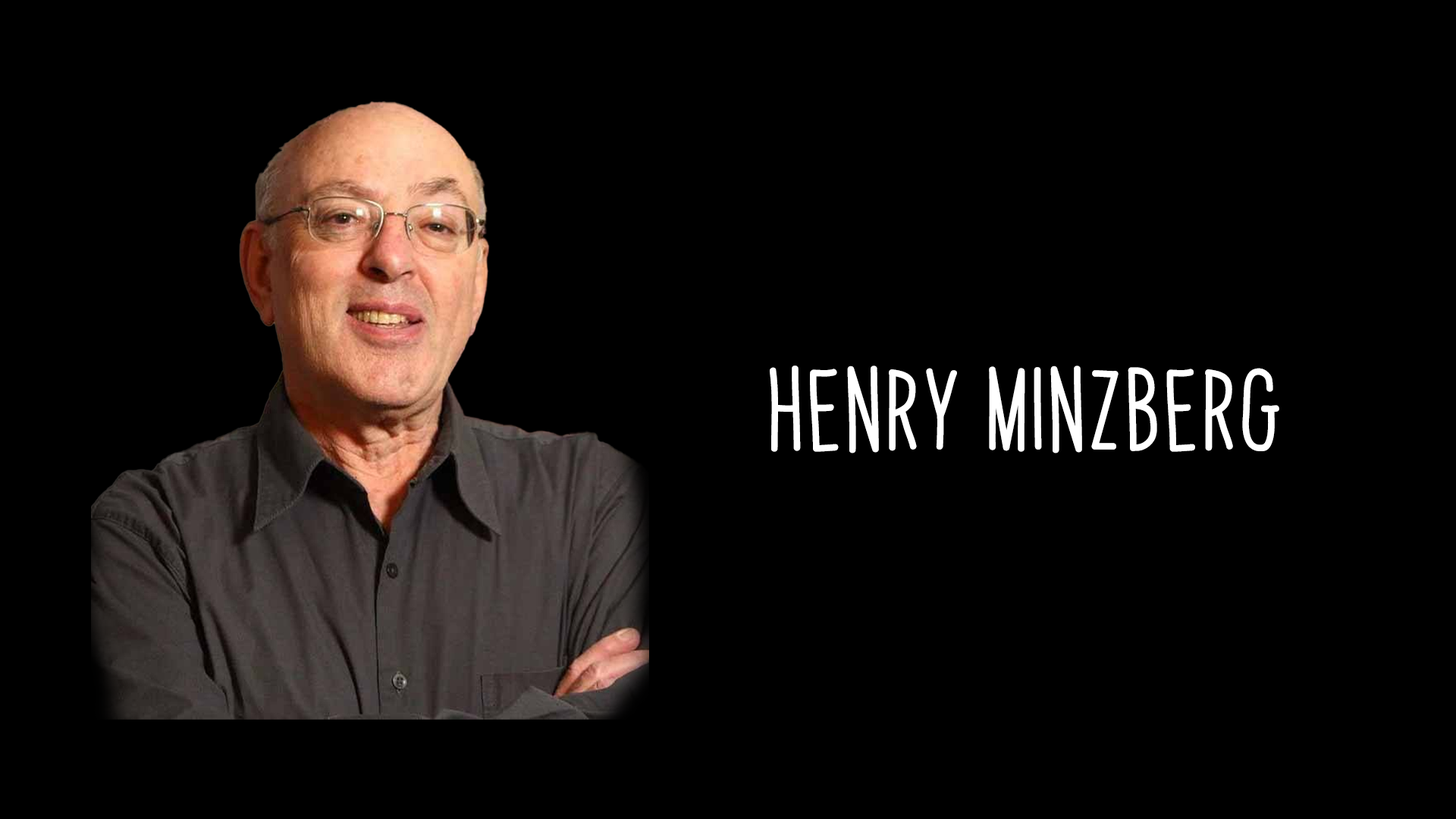
<style>
.page{position:relative;width:1456px;height:819px;background:#000000}
.page>*{position:absolute;margin:0}
.t1{font:69.8px "PapayaSunrise";color:#ffffff;font-weight:bold}
</style>
<div class="page">
<p class="t1" style="left:770px;top:366px;width:509px;height:87px">Henry minzberg</p>
</div>
